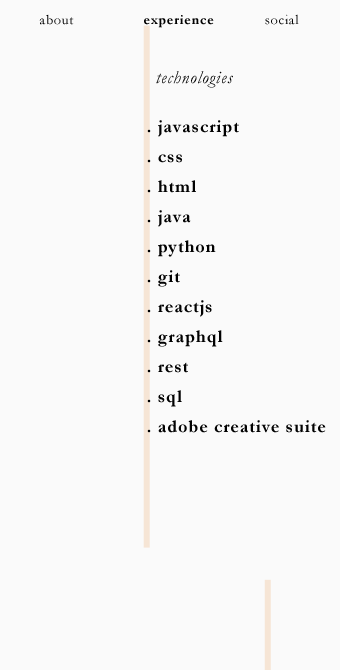
<style>
.page{position:relative;width:340px;height:670px;background:#fafafa}
.page>*{position:absolute;margin:0}
.t1{font:14px "Garamond";letter-spacing:0.05em;color:#010101}
.t2{font:14px "Garamond-Bold";letter-spacing:0.05em;color:#010101}
.t3{font:18px "Garamond-Italic";letter-spacing:0.05em;color:#010101}
.t4{font:18px/30px "Garamond-Bold";letter-spacing:0.05em;color:#010101}
</style>
<div class="page">
<p class="t1" style="left:39px;top:14px;width:35px;height:11px">about</p>
<p class="t2" style="left:144px;top:15px;width:70px;height:13px">experience</p>
<p class="t1" style="left:265px;top:14px;width:34px;height:11px">social</p>
<p class="t3" style="left:156px;top:71px;width:77px;height:17px">technologies</p>
<p class="t4" style="left:147px;top:120px;width:179px;height:313px">. javascript<br>. css<br>. html<br>. java<br>. python<br>. git<br>. reactjs<br>. graphql<br>. rest<br>. sql<br>. adobe creative suite</p>
</div>
